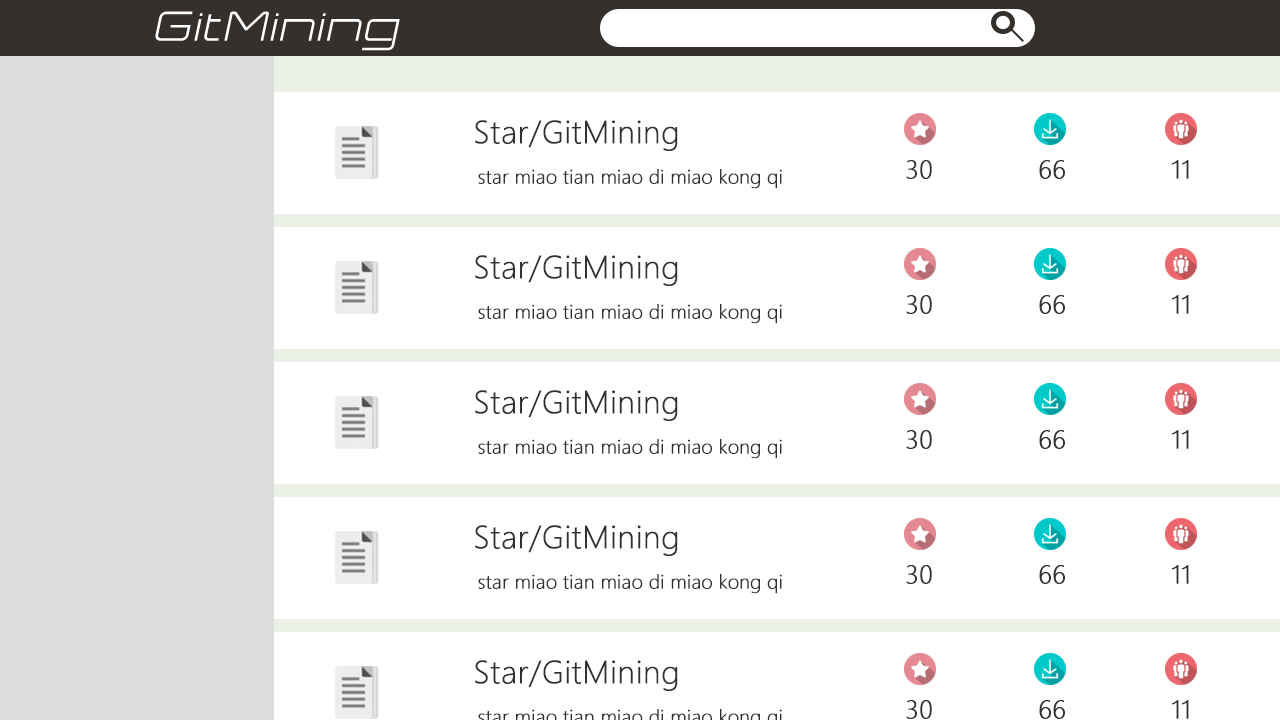
<style>
.page{position:relative;width:1280px;height:720px;background:#ffffff}
.page>*{position:absolute;margin:0}
.t1{font:40px "Expansiva-Italic";color:#ffffff;font-weight:bold}
.t2{font:30px "MicrosoftYaHeiLight";color:#34302d;font-weight:bold}
.t3{font:24px "MicrosoftYaHeiLight";color:#34302d;font-weight:bold}
.t4{font:18px "MicrosoftYaHeiLight";color:#34302d;font-weight:bold}
</style>
<div class="page">
<p class="t1" style="left:155px;top:11px;width:245px;height:40px">GitMining</p>
<p class="t2" style="left:475px;top:120px;width:203px;height:31px">Star/GitMining</p>
<p class="t3" style="left:906px;top:160px;width:26px;height:19px">30</p>
<p class="t3" style="left:1039px;top:160px;width:26px;height:19px">66</p>
<p class="t3" style="left:1172px;top:160px;width:17px;height:19px">11</p>
<p class="t4" style="left:478px;top:169px;width:304px;height:20px">star miao tian miao di miao kong qi</p>
<p class="t2" style="left:475px;top:255px;width:203px;height:31px">Star/GitMining</p>
<p class="t4" style="left:478px;top:304px;width:304px;height:20px">star miao tian miao di miao kong qi</p>
<p class="t3" style="left:906px;top:295px;width:26px;height:19px">30</p>
<p class="t3" style="left:1039px;top:295px;width:26px;height:19px">66</p>
<p class="t3" style="left:1172px;top:295px;width:17px;height:19px">11</p>
<p class="t2" style="left:475px;top:390px;width:203px;height:31px">Star/GitMining</p>
<p class="t3" style="left:906px;top:430px;width:26px;height:19px">30</p>
<p class="t3" style="left:1039px;top:430px;width:26px;height:19px">66</p>
<p class="t3" style="left:1172px;top:430px;width:17px;height:19px">11</p>
<p class="t4" style="left:478px;top:439px;width:304px;height:20px">star miao tian miao di miao kong qi</p>
<p class="t2" style="left:475px;top:525px;width:203px;height:31px">Star/GitMining</p>
<p class="t3" style="left:906px;top:565px;width:26px;height:19px">30</p>
<p class="t3" style="left:1039px;top:565px;width:26px;height:19px">66</p>
<p class="t3" style="left:1172px;top:565px;width:17px;height:19px">11</p>
<p class="t4" style="left:478px;top:574px;width:304px;height:20px">star miao tian miao di miao kong qi</p>
<p class="t2" style="left:475px;top:660px;width:203px;height:31px">Star/GitMining</p>
<p class="t3" style="left:906px;top:700px;width:26px;height:19px">30</p>
<p class="t3" style="left:1039px;top:700px;width:26px;height:19px">66</p>
<p class="t3" style="left:1172px;top:700px;width:17px;height:19px">11</p>
</div>
